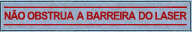
<style>
.page{position:relative;width:192px;height:32px}
.page>*{position:absolute;margin:0}
.t1{font:11px "Arial-BoldMT";letter-spacing:-0.06em;color:#a21414;text-transform:uppercase;scale:0.93 1}
.t2{font:11px "Arial-BoldMT";letter-spacing:0.12em;color:#a21414;text-transform:uppercase;scale:0.93 1}
.t3{font:11px "Arial-BoldMT";letter-spacing:-0.02em;color:#a21414;text-transform:uppercase;scale:0.93 1}
.t4{font:11px "Arial-BoldMT";letter-spacing:0.06em;color:#a21414;text-transform:uppercase;scale:0.93 1}
</style>
<div class="page">
<p class="t1" style="left:4px;top:9px;width:183px;height:11px">NÃO OBSTRU<span class="t2">A </span><span class="t3">A </span>BARREIR<span class="t4">A</span> DO LASER</p>
</div>
